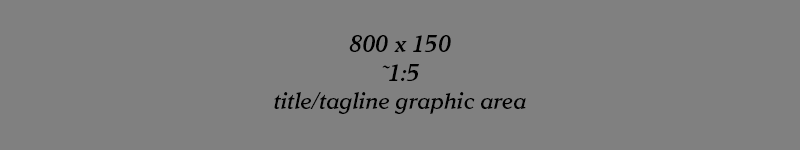
<style>
.page{position:relative;width:800px;height:150px;background:#808080}
.page>*{position:absolute;margin:0}
.t1{font:24px "Kandal-MediumItalic";color:#000000}
</style>
<div class="page">
<p class="t1" style="left:274px;top:35px;width:252px;height:79px;text-align:center">800 x 150<br>~1:5<br>title/tagline graphic area</p>
</div>
